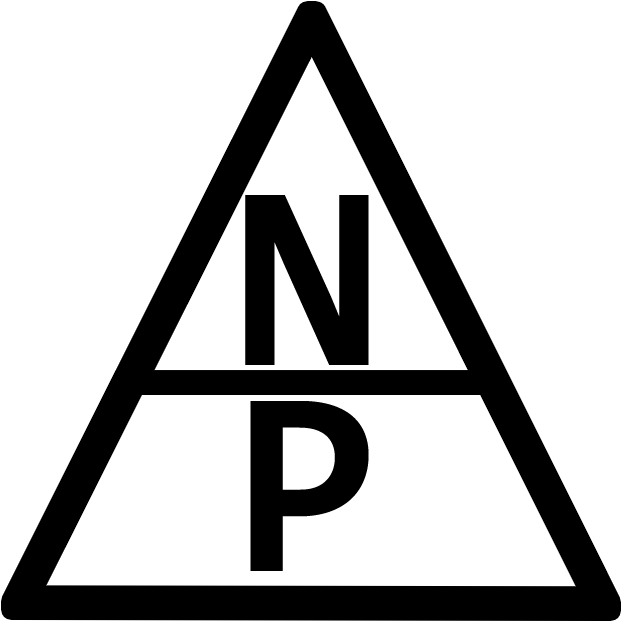
<style>
.page{position:relative;width:622px;height:622px;background:#ffffff}
.page>*{position:absolute;margin:0}
.t1{font:266.5px "Consolas-Bold";color:#000000}
</style>
<div class="page">
<p class="t1" style="left:245px;top:195px;width:124px;height:376px;text-align:center">N<br>P</p>
</div>
